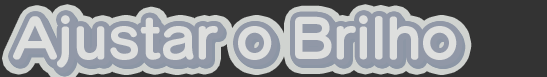
<style>
.page{position:relative;width:547px;height:77px;background:#333333}
.page>*{position:absolute;margin:0}
.t1{font:54px "SeuratPro-B";color:#dedfde}
.t2{font:54px "SeuratPro-B"}
</style>
<div class="page">
<p class="t1" style="left:13px;top:15px;width:444px;height:53px">Ajustar o Brilho</p>
<p class="t1" style="left:14px;top:17px;width:444px;height:53px">Ajustar o Brilho</p>
<p class="t1" style="left:14px;top:16px;width:444px;height:53px">Ajustar o Brilho</p>
<p class="t1" style="left:14px;top:15px;width:444px;height:53px">Ajustar o Brilho</p>
<p class="t1" style="left:15px;top:17px;width:444px;height:53px">Ajustar o Brilho</p>
<p class="t1" style="left:15px;top:17px;width:444px;height:53px">Ajustar o Brilho</p>
<p class="t2" style="left:15px;top:18px;width:444px;height:53px">Ajustar o Brilho</p>
</div>
